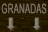
<style>
.page{position:relative;width:48px;height:32px}
.page>*{position:absolute;margin:0}
.t1{font:12.7px "ArialMT";letter-spacing:0.02em;color:#7d7161;text-transform:uppercase;font-weight:bold;scale:0.6 1}
</style>
<div class="page">
<p class="t1" style="left:1px;top:3px;width:46px;height:11px">GRANADAS</p>
</div>
